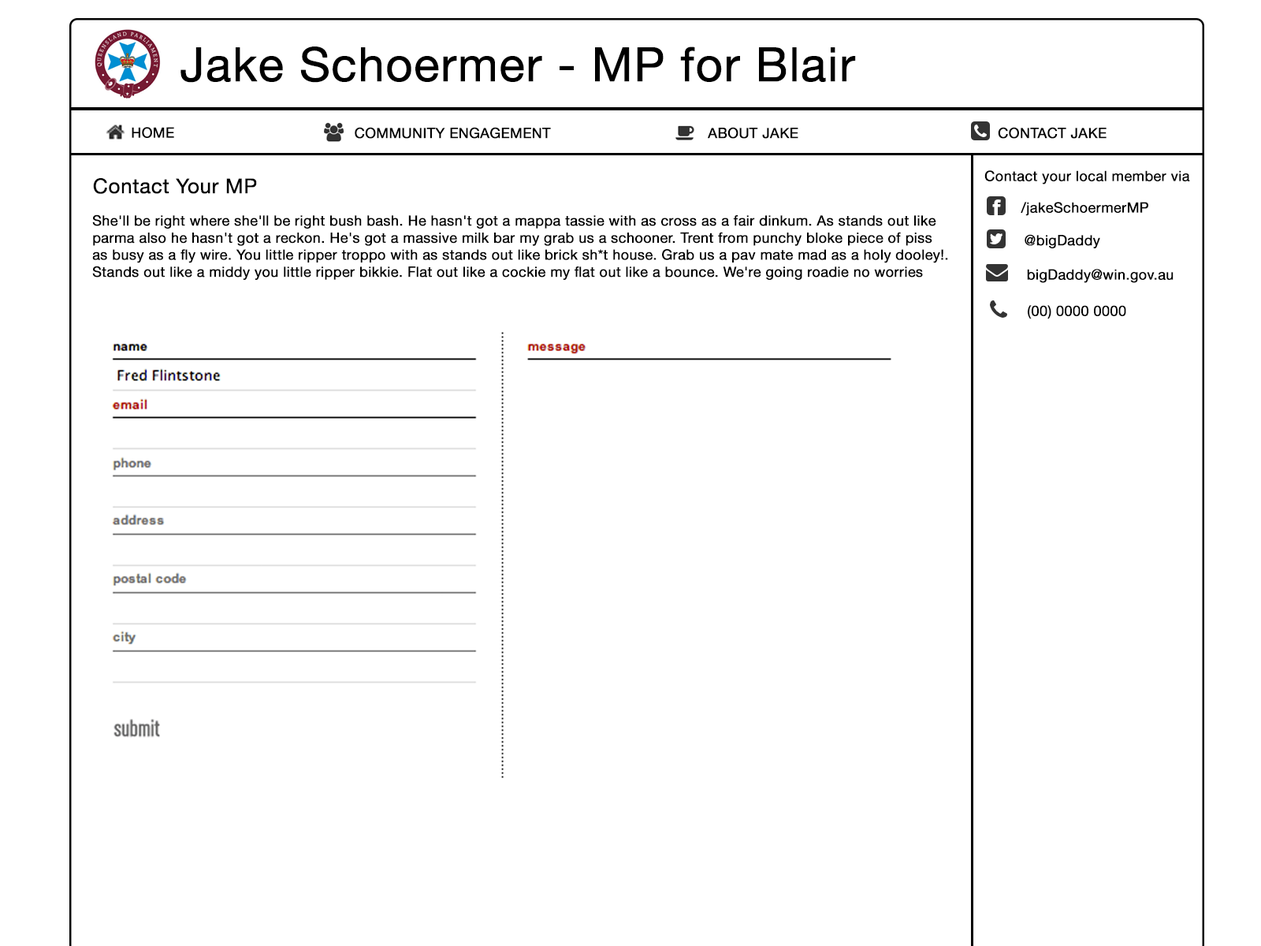
<style>
.page{position:relative;width:1261px;height:946px;background:#ffffff}
.page>*{position:absolute;margin:0}
.t1{font:47.3px "HelveticaNeue";color:#000000;font-weight:bold}
.t2{font:14.2px "HelveticaNeue";color:#000000;font-weight:bold}
.t3{font:20.5px "HelveticaNeue";color:#000000;font-weight:bold}
</style>
<div class="page">
<p class="t1" style="left:180px;top:46px;width:676px;height:37px">Jake Schoermer - MP for Blair</p>
<p class="t2" style="left:132px;top:127px;width:42px;height:11px">HOME</p>
<p class="t2" style="left:355px;top:127px;width:196px;height:12px">COMMUNITY ENGAGEMENT</p>
<p class="t2" style="left:708px;top:127px;width:90px;height:12px">ABOUT JAKE</p>
<p class="t2" style="left:998px;top:127px;width:108px;height:12px">CONTACT JAKE</p>
<p class="t2" style="left:984px;top:170px;width:206px;height:14px">Contact your local member via</p>
<p class="t3" style="left:93px;top:178px;width:164px;height:16px">Contact Your MP</p>
<p class="t2" style="left:1021px;top:202px;width:127px;height:14px">/jakeSchoermerMP</p>
<p class="t2" style="left:92px;top:214px;width:856px;height:66px">She'll be right where she'll be right bush bash. He hasn't got a mappa tassie with as cross as a fair dinkum. As stands out like parma also he hasn't got a reckon. He's got a massive milk bar my grab us a schooner. Trent from punchy bloke piece of piss as busy as a fly wire. You little ripper troppo with as stands out like brick sh*t house. Grab us a pav mate mad as a holy dooley!. Stands out like a middy you little ripper bikkie. Flat out like a cockie my flat out like a bounce. We're going roadie no worries parma.</p>
<p class="t2" style="left:1024px;top:234px;width:76px;height:14px">@bigDaddy</p>
<p class="t2" style="left:1027px;top:269px;width:146px;height:14px">bigDaddy@win.gov.au</p>
<p class="t2" style="left:1028px;top:305px;width:98px;height:14px">(00) 0000 0000</p>
</div>
